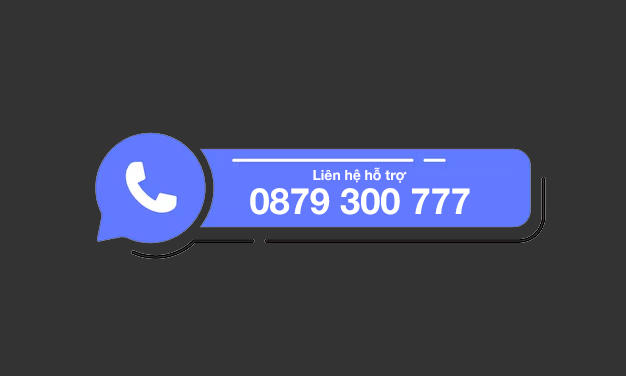
<style>
.page{position:relative;width:626px;height:376px;background:#333333}
.page>*{position:absolute;margin:0}
.t1{font:14px "HelveticaNeue-Bold";color:#ffffff}
.t2{font:36.2px "HelveticaNeue-Bold";color:#ffffff}
</style>
<div class="page">
<p class="t1" style="left:313px;top:167px;width:94px;height:16px">Liên hệ hỗ trợ</p>
<p class="t2" style="left:250px;top:188px;width:220px;height:27px">0879 300 777</p>
</div>
